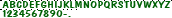
<style>
.page{position:relative;width:172px;height:18px;background:#ffffff}
.page>*{position:absolute;margin:0}
.t1{font:10.2px/8.8px "DomCasualBT-Regular";letter-spacing:0.025em;color:#006105;scale:1.32 1}
</style>
<div class="page">
<p class="t1" style="left:2px;top:1px;width:169px;height:16px">ABCDEFGHIJKLMNOPQRSTUVWXYZ<br>1234567890-.</p>
</div>
